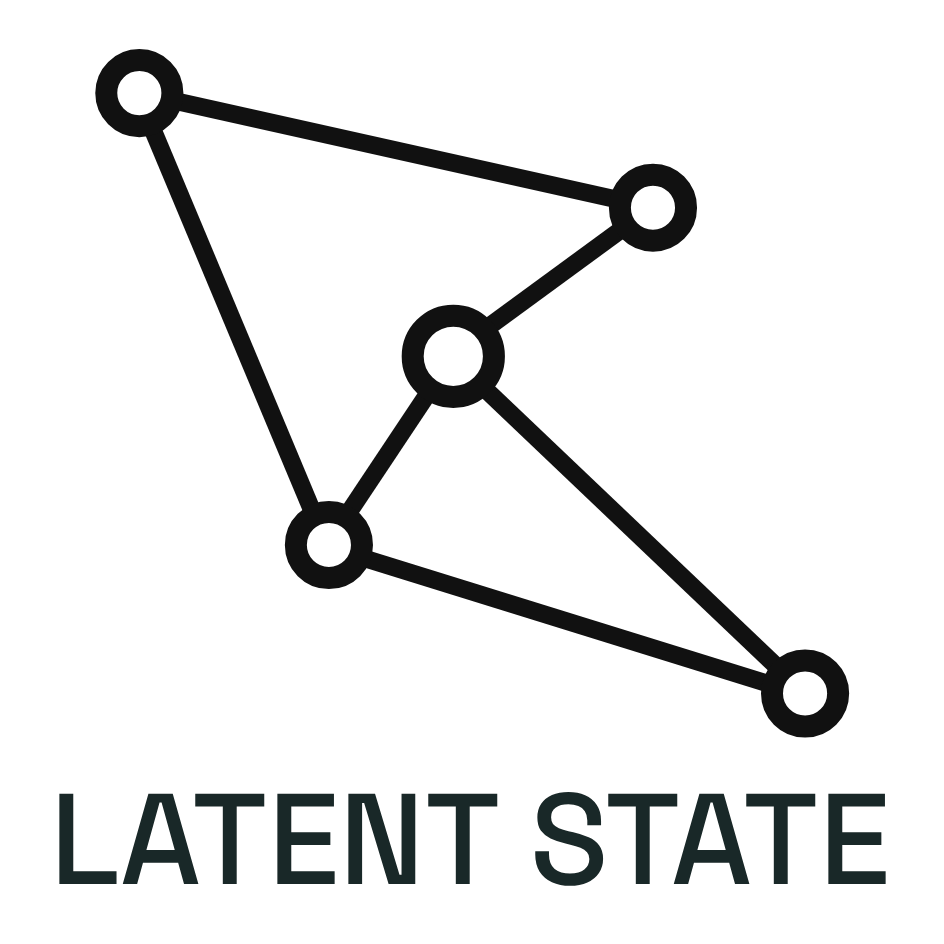
<style>
.page{position:relative;width:944px;height:944px;background:#ffffff}
.page>*{position:absolute;margin:0}
.t1{font:128.8px "SpaceGroteskLight-Medium";color:#011111}
</style>
<div class="page">
<p class="t1" style="left:59px;top:792px;width:827px;height:94px">LATENT STATE</p>
</div>
